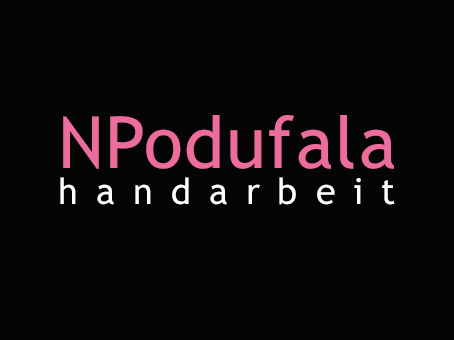
<style>
.page{position:relative;width:454px;height:340px;background:#060505}
.page>*{position:absolute;margin:0}
.t1{font:36px/36px "TrebuchetMS";letter-spacing:0.5em;color:#ffffff}
.t2{font:72px/66px "TrebuchetMS";letter-spacing:0.025em;color:#ed6c9e}
</style>
<div class="page">
<p class="t1" style="left:60px;top:115px;width:335px;height:90px;text-align:center"><span class="t2">NPodufala<br> </span>handarbeit</p>
</div>
